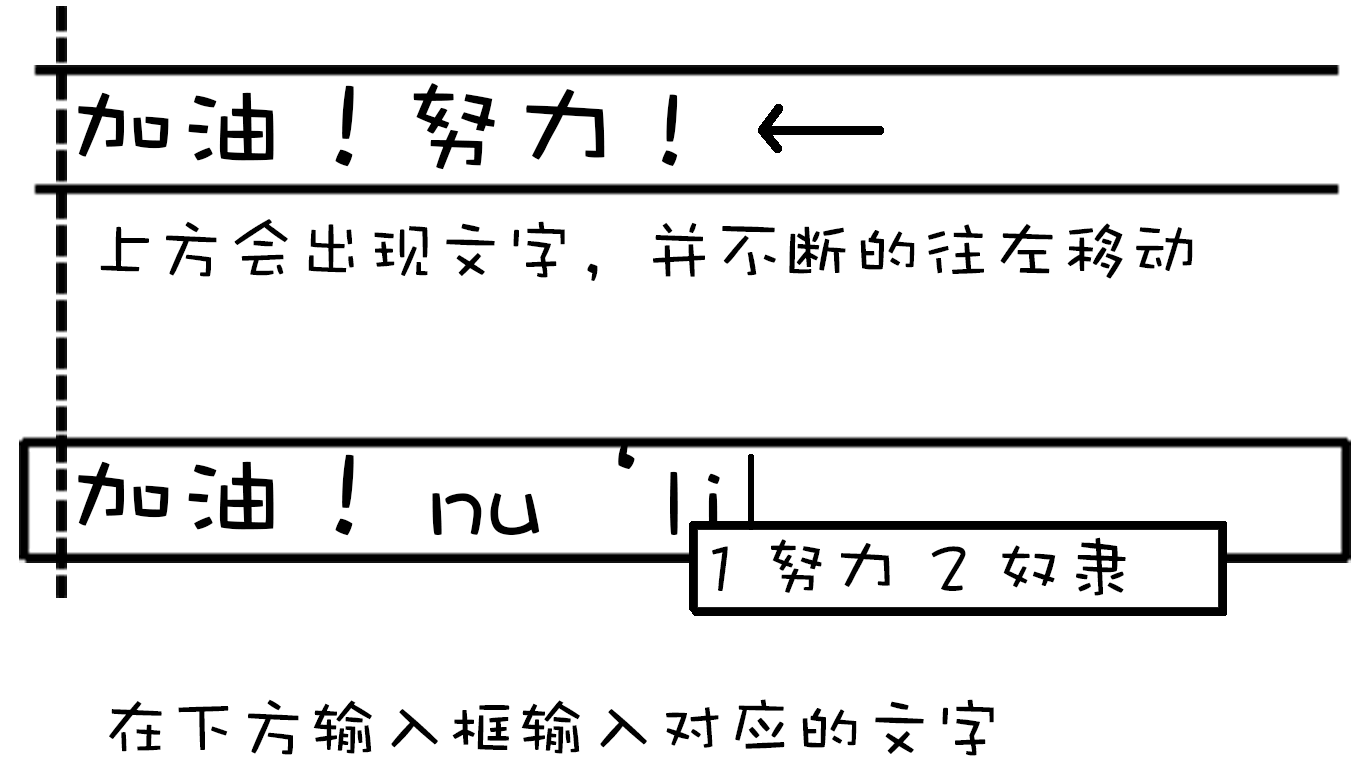
<style>
.page{position:relative;width:1368px;height:773px;background:#ffffff}
.page>*{position:absolute;margin:0}
.t1{font:111.1px "DFPWaWaW5";color:#000000}
.t2{font:69.4px "DFPWaWaW5";color:#000000}
</style>
<div class="page">
<p class="t1" style="left:78px;top:83px;width:600px;height:87px">加油！努力!</p>
<p class="t2" style="left:100px;top:219px;width:1093px;height:62px">上方会出现文字，并不断的往左移动</p>
<p class="t1" style="left:78px;top:441px;width:642px;height:95px">加油！nu‘li</p>
<p class="t2" style="left:712px;top:537px;width:414px;height:59px">1努力 2 奴隶</p>
<p class="t2" style="left:109px;top:699px;width:885px;height:57px">在下方输入框输入对应的文字</p>
</div>
